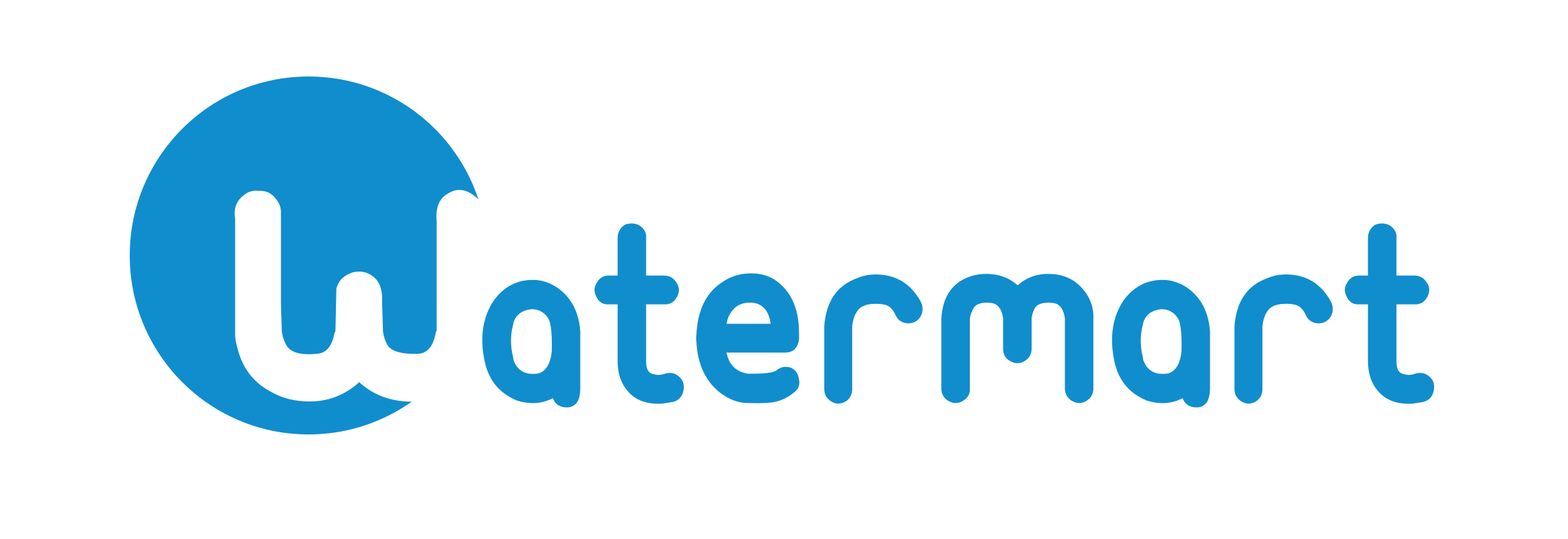
<style>
.page{position:relative;width:1568px;height:539px;background:#ffffff}
.page>*{position:absolute;margin:0}
.t1{font:270.9px "Ubuntu-Title";color:#108dcd}
</style>
<div class="page">
<p class="t1" style="left:482px;top:223px;width:953px;height:184px">atermart</p>
</div>
